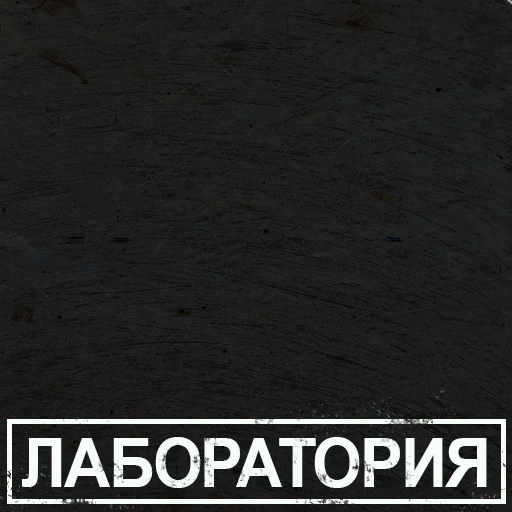
<style>
.page{position:relative;width:512px;height:512px}
.page>*{position:absolute;margin:0}
.t1{font:68px "Arial-BoldMT";letter-spacing:-0.03em;color:#f8fcf8;scale:0.94 1}
</style>
<div class="page">
<p class="t1" style="left:22px;top:437px;width:465px;height:51px">ЛАБОРАТОРИЯ</p>
</div>
